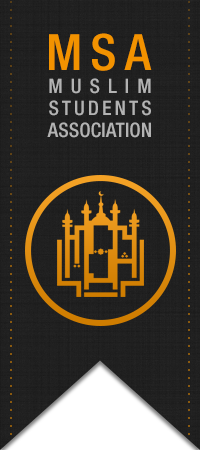
<style>
.page{position:relative;width:200px;height:450px;background:#202020}
.page>*{position:absolute;margin:0}
.t1{font:50px "HelveticaNeue-MediumCond";letter-spacing:0.17em;color:#f29200}
.t2{font:20px/22px "HelveticaNeue-MediumCond";letter-spacing:0.01em;color:#b3b3b3;text-transform:uppercase}
.t3{font:20px/22px "HelveticaNeue-MediumCond";letter-spacing:0.4em;color:#b3b3b3;text-transform:uppercase}
.t4{font:20px/22px "HelveticaNeue-MediumCond";letter-spacing:0.15em;color:#b3b3b3;text-transform:uppercase}
</style>
<div class="page">
<p class="t1" style="left:49px;top:33px;width:103px;height:38px">MSA</p>
<p class="t2" style="left:47px;top:78px;width:104px;height:60px;text-align:center"><span class="t3">Muslim<br></span><span class="t4">Students<br></span>Association</p>
</div>
